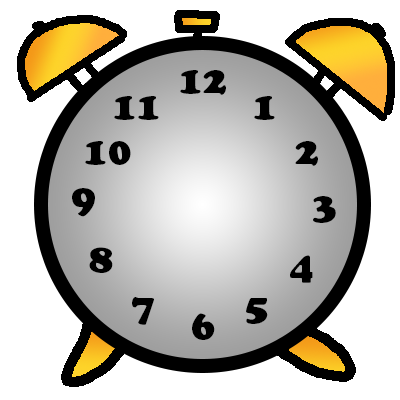
<style>
.page{position:relative;width:400px;height:400px;background:#ffffff}
.page>*{position:absolute;margin:0}
.t1{font:37.5px "CooperBlackStd";color:#000000}
.t2{font:37.9px "CooperBlackStd";color:#000000}
</style>
<div class="page">
<p class="t1" style="left:180px;top:70px;width:46px;height:25px">12v</p>
<p class="t1" style="left:114px;top:96px;width:45px;height:24px">11</p>
<p class="t1" style="left:254px;top:96px;width:21px;height:24px">1</p>
<p class="t1" style="left:85px;top:141px;width:46px;height:24px">10</p>
<p class="t1" style="left:295px;top:141px;width:23px;height:25px">2</p>
<p class="t2" style="left:72px;top:188px;width:23px;height:29px;text-align:center">9<br><br><br><br><br><br>vv</p>
<p class="t1" style="left:313px;top:196px;width:23px;height:27px;text-align:center">3<br><br>vv</p>
<p class="t1" style="left:89px;top:247px;width:24px;height:26px">8</p>
<p class="t1" style="left:290px;top:255px;width:23px;height:28px">4</p>
<p class="t1" style="left:132px;top:297px;width:22px;height:28px">7</p>
<p class="t1" style="left:246px;top:298px;width:22px;height:26px">5</p>
<p class="t2" style="left:192px;top:313px;width:23px;height:27px;text-align:center">6<br><br><br><br><br>vv</p>
</div>
